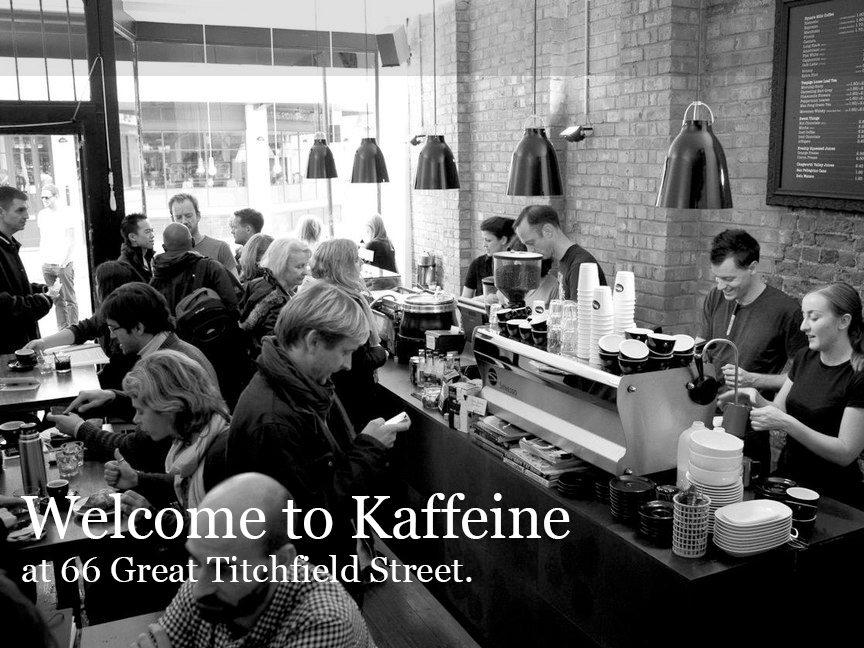
<style>
.page{position:relative;width:864px;height:648px}
.page>*{position:absolute;margin:0}
.t1{font:36px "Georgia";color:#ffffff}
.t2{font:60px "Georgia";color:#ffffff}
</style>
<div class="page">
<p class="t1" style="left:20px;top:493px;width:550px;height:89px"><span class="t2"><br>Welcome to Kaffeine <br></span>at 66 Great Titchfield Street.</p>
</div>
